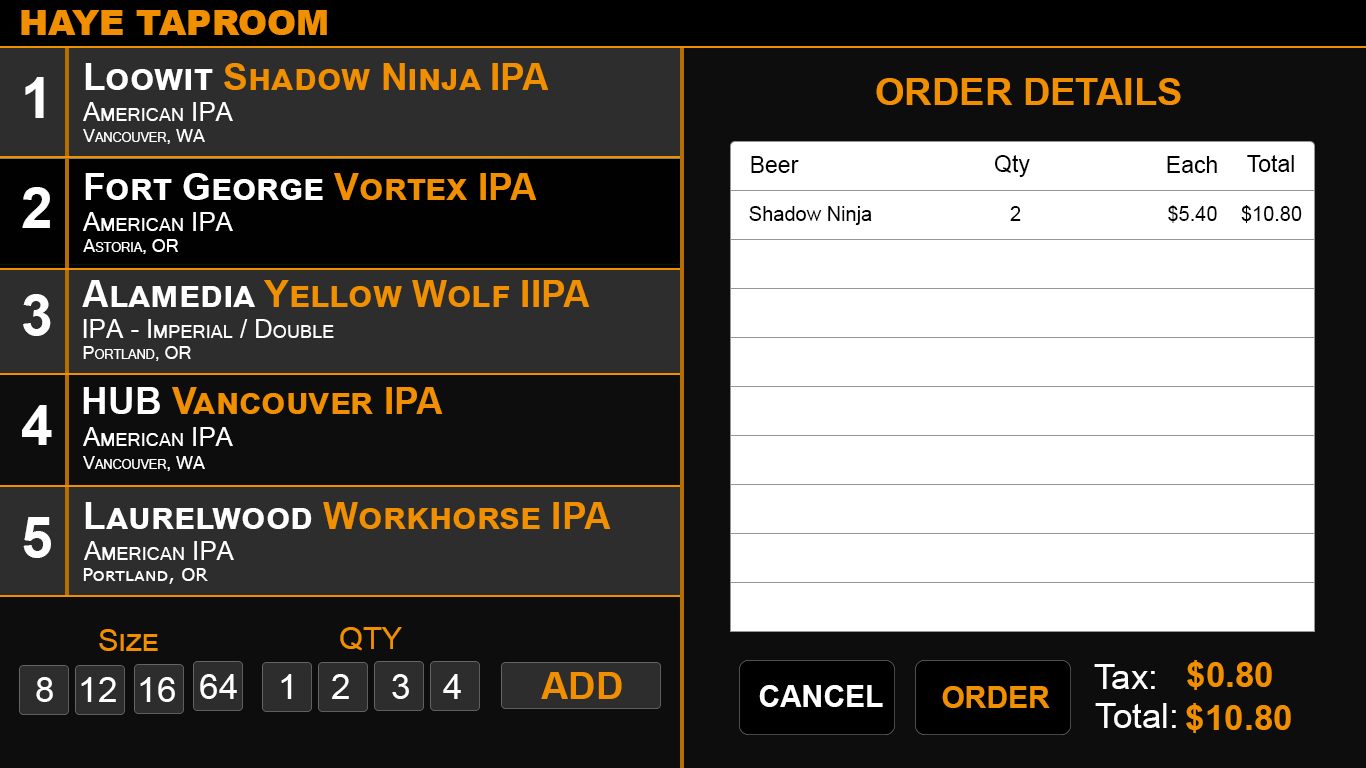
<style>
.page{position:relative;width:1366px;height:768px;background:#0d0d0d}
.page>*{position:absolute;margin:0}
.t1{font:35px "Arial-Black";color:#f09000;font-variant:small-caps}
.t2{font:37px "Arial-BoldMT";color:#f09000;font-variant:small-caps}
.t3{font:37px "Arial-BoldMT";color:#ffffff;font-variant:small-caps}
.t4{font:57px "Arial-BoldMT";color:#fefefe;font-variant:small-caps}
.t5{font:38px "Arial-BoldMT";color:#f09000;font-variant:small-caps}
.t6{font:26px "MicrosoftSansSerif";color:#ffffff;font-variant:small-caps}
.t7{font:18px "MicrosoftSansSerif";color:#ffffff;font-variant:small-caps}
.t8{font:23px "ArialMT";color:#000000}
.t9{font:20px "ArialMT";color:#000000}
.t10{font:18px "Verdana";color:#ffffff;font-variant:small-caps}
.t11{font:30.6px "ArialMT";color:#f09000;font-variant:small-caps}
.t12{font:35px "ArialMT";color:#fefefe}
.t13{font:35px "Arial-BoldMT";color:#f09000}
.t14{font:35px "ArialMT";color:#ffffff;font-variant:small-caps}
.t15{font:30px "Arial-BoldMT";color:#ffffff}
.t16{font:30px "Arial-BoldMT";color:#f09000}
</style>
<div class="page">
<p class="t1" style="left:21px;top:10px;width:306px;height:25px">HAYE TAPROOM</p>
<p class="t2" style="left:85px;top:63px;width:464px;height:27px"><span class="t3">Loowit </span>Shadow Ninja IPA</p>
<p class="t4" style="left:25px;top:77px;width:19px;height:41px">1</p>
<p class="t5" style="left:876px;top:78px;width:305px;height:27px">ORDER DETAILS</p>
<p class="t6" style="left:83px;top:102px;width:150px;height:19px">American IPA</p>
<p class="t7" style="left:83px;top:129px;width:122px;height:15px">Vancouver, WA</p>
<p class="t8" style="left:751px;top:156px;width:48px;height:17px">Beer</p>
<p class="t8" style="left:994px;top:155px;width:36px;height:22px">Qty</p>
<p class="t8" style="left:1167px;top:156px;width:50px;height:17px">Each</p>
<p class="t8" style="left:1247px;top:155px;width:47px;height:17px">Total</p>
<p class="t3" style="left:85px;top:173px;width:452px;height:27px">Fort George <span class="t2">Vortex IPA</span></p>
<p class="t4" style="left:22px;top:187px;width:28px;height:41px">2</p>
<p class="t9" style="left:749px;top:206px;width:123px;height:19px">Shadow Ninja</p>
<p class="t9" style="left:1010px;top:206px;width:11px;height:15px">2</p>
<p class="t9" style="left:1168px;top:205px;width:49px;height:18px">$5.40</p>
<p class="t9" style="left:1241px;top:205px;width:61px;height:18px">$10.80</p>
<p class="t6" style="left:83px;top:212px;width:150px;height:19px">American IPA</p>
<p class="t7" style="left:83px;top:239px;width:95px;height:15px">Astoria, OR</p>
<p class="t2" style="left:82px;top:280px;width:508px;height:27px"><span class="t3">Alamedia </span>Yellow Wolf IIPA</p>
<p class="t4" style="left:23px;top:294px;width:28px;height:42px">3</p>
<p class="t6" style="left:83px;top:319px;width:251px;height:19px">IPA - Imperial / Double</p>
<p class="t7" style="left:83px;top:346px;width:108px;height:15px">Portland, OR</p>
<p class="t2" style="left:83px;top:387px;width:360px;height:27px"><span class="t3">HUB </span>Vancouver IPA</p>
<p class="t4" style="left:22px;top:405px;width:30px;height:40px">4</p>
<p class="t6" style="left:83px;top:427px;width:150px;height:19px">American IPA</p>
<p class="t7" style="left:83px;top:456px;width:122px;height:15px">Vancouver, WA</p>
<p class="t2" style="left:85px;top:502px;width:526px;height:27px"><span class="t3">Laurelwood </span>Workhorse IPA</p>
<p class="t4" style="left:23px;top:517px;width:28px;height:41px">5</p>
<p class="t6" style="left:84px;top:541px;width:150px;height:19px">American IPA</p>
<p class="t10" style="left:83px;top:568px;width:125px;height:16px">Portland, OR</p>
<p class="t11" style="left:99px;top:629px;width:59px;height:22px">Size</p>
<p class="t11" style="left:340px;top:627px;width:62px;height:24px">QTY</p>
<p class="t12" style="left:1094px;top:664px;width:61px;height:25px">Tax:</p>
<p class="t13" style="left:1187px;top:660px;width:85px;height:30px">$0.80</p>
<p class="t14" style="left:36px;top:677px;width:17px;height:25px">8</p>
<p class="t14" style="left:81px;top:677px;width:35px;height:25px">12</p>
<p class="t14" style="left:140px;top:677px;width:35px;height:25px">16</p>
<p class="t14" style="left:200px;top:674px;width:37px;height:25px">64</p>
<p class="t14" style="left:281px;top:674px;width:11px;height:25px">1</p>
<p class="t14" style="left:332px;top:674px;width:17px;height:25px">2</p>
<p class="t14" style="left:392px;top:674px;width:17px;height:25px">3</p>
<p class="t14" style="left:443px;top:674px;width:18px;height:25px">4</p>
<p class="t5" style="left:541px;top:672px;width:81px;height:27px">ADD</p>
<p class="t15" style="left:759px;top:685px;width:124px;height:22px">CANCEL</p>
<p class="t16" style="left:942px;top:686px;width:108px;height:22px">ORDER</p>
<p class="t12" style="left:1095px;top:703px;width:81px;height:25px">Total:</p>
<p class="t13" style="left:1186px;top:703px;width:105px;height:30px">$10.80</p>
</div>
